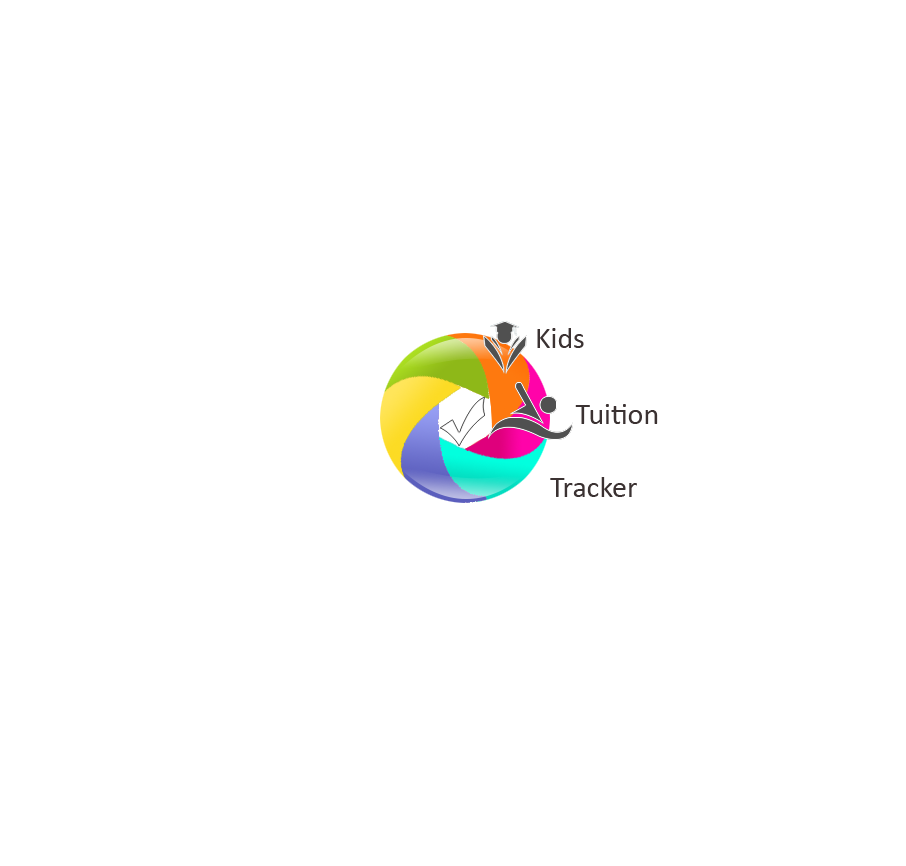
<style>
.page{position:relative;width:906px;height:866px;background:#ffffff}
.page>*{position:absolute;margin:0}
.t1{font:30px "Calibri";color:#3b3232}
</style>
<div class="page">
<p class="t1" style="left:537px;top:328px;width:47px;height:20px">Kids</p>
<p class="t1" style="left:575px;top:404px;width:83px;height:20px">Tuition</p>
<p class="t1" style="left:550px;top:477px;width:87px;height:20px">Tracker</p>
</div>
